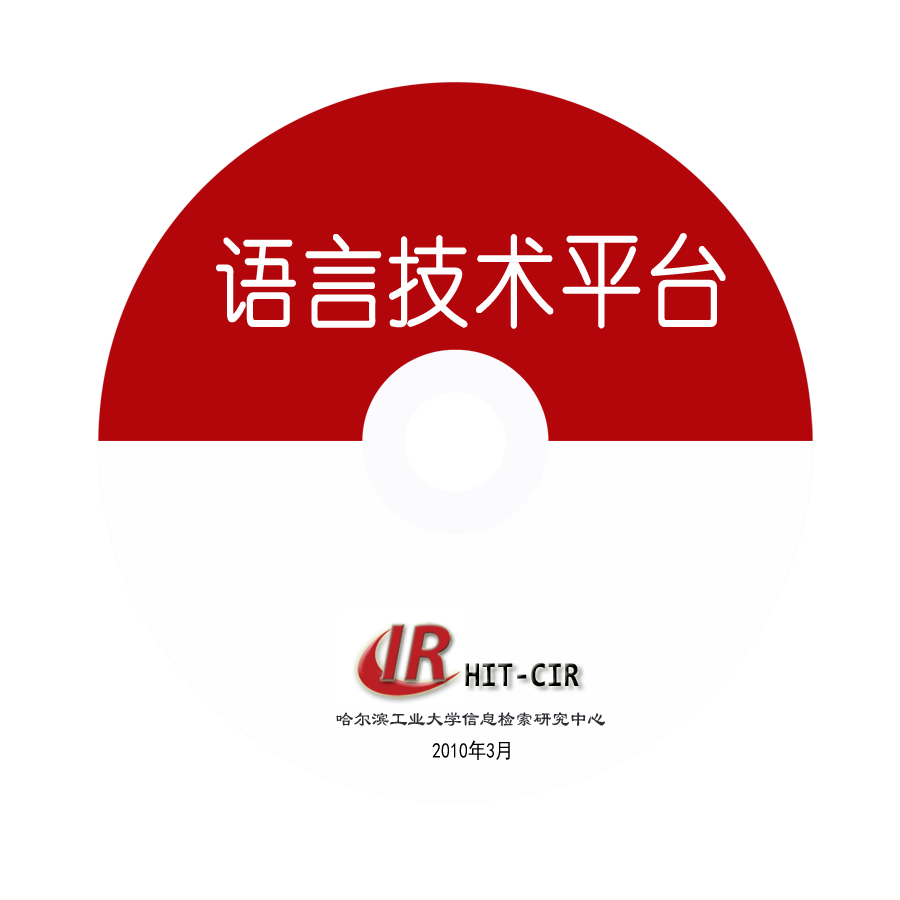
<style>
.page{position:relative;width:900px;height:900px;background:#ffffff}
.page>*{position:absolute;margin:0}
.t1{font:98.8px "YouYuan";color:#fefefe;font-weight:bold;scale:0.85 1}
.t2{font:35.3px "Consolas-Bold";color:#000000;scale:0.85 1}
.t3{font:21.2px "LiSu";color:#302e34;scale:0.85 1}
.t4{font:21.2px "SimHei";color:#000000;scale:0.85 1}
</style>
<div class="page">
<p class="t1" style="left:216px;top:233px;width:510px;height:96px">语言技术平台</p>
<p class="t2" style="left:465px;top:663px;width:114px;height:24px">HIT-CIR</p>
<p class="t3" style="left:336px;top:712px;width:269px;height:14px">哈尔滨工业大学信息检索研究中心</p>
<p class="t4" style="left:432px;top:740px;width:78px;height:20px">2010年3月</p>
</div>
